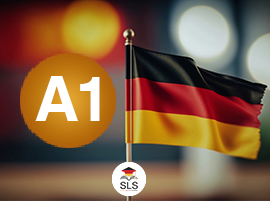
<style>
.page{position:relative;width:270px;height:201px}
.page>*{position:absolute;margin:0}
.t1{font:62px "Coolvetica";color:#ffffff}
</style>
<div class="page">
<p class="t1" style="left:35px;top:76px;width:65px;height:45px">A1</p>
</div>
